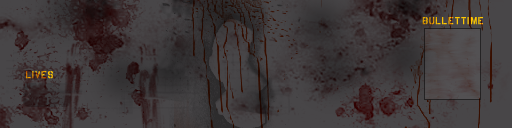
<style>
.page{position:relative;width:512px;height:128px}
.page>*{position:absolute;margin:0}
.t1{font:10px "USAAF_Stencil";letter-spacing:0.1em;color:#ffc800}
.t2{font:10px "USAAF_Stencil";letter-spacing:0.1em}
</style>
<div class="page">
<p class="t1" style="left:422px;top:17px;width:61px;height:8px">BULLETTIME</p>
<p class="t2" style="left:26px;top:71px;width:27px;height:8px">LIVES</p>
</div>
